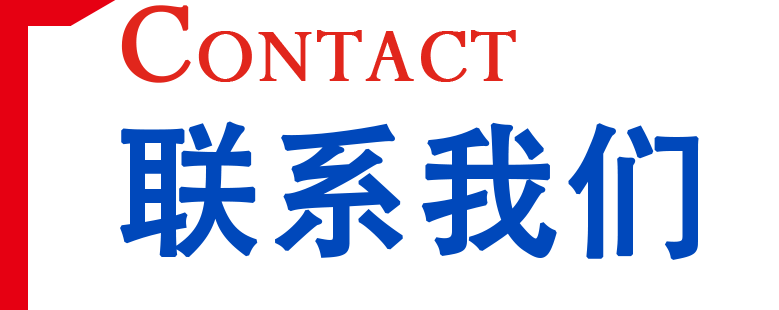
<style>
.page{position:relative;width:779px;height:310px;background:#ffffff}
.page>*{position:absolute;margin:0}
.t1{font:125px "Perpetua";color:#e1261c;font-weight:bold}
.t2{font:83.3px "Perpetua";color:#e1261c;font-weight:bold}
.t3{font:145.8px "AdobeHeitiStd-Regular";color:#0048bb;font-weight:bold}
</style>
<div class="page">
<p class="t1" style="left:121px;top:5px;width:70px;height:78px">C</p>
<p class="t2" style="left:198px;top:30px;width:318px;height:52px">ONTACT</p>
<p class="t3" style="left:120px;top:121px;width:579px;height:139px">联系我们</p>
</div>
